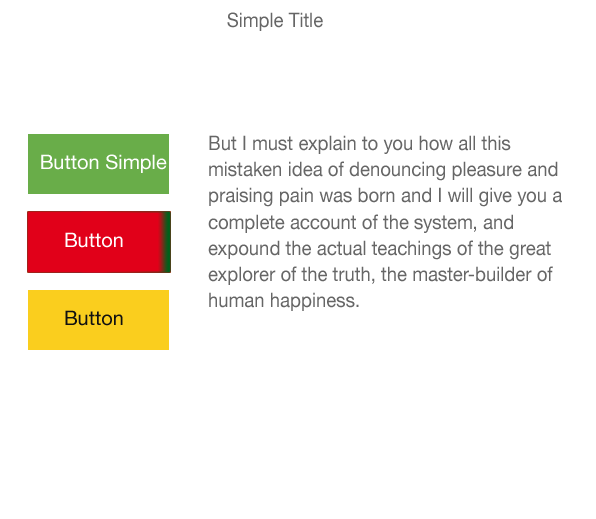
<style>
.page{position:relative;width:596px;height:519px;background:#ffffff}
.page>*{position:absolute;margin:0}
.t1{font:20px "HelveticaNeue";color:#666666;scale:0.93 1}
.t2{font:20px/26px "HelveticaNeue";color:#666666;scale:0.93 1}
.t3{font:20px "HelveticaNeue";color:#ffffff}
.t4{font:20px "HelveticaNeue";color:#111111}
</style>
<div class="page">
<p class="t1" style="left:227px;top:12px;width:96px;height:19px">Simple Title</p>
<p class="t2" style="left:208px;top:135px;width:354px;height:176px">But I must explain to you how all this mistaken idea of denouncing pleasure and praising pain was born and I will give you a complete account of the system, and expound the actual teachings of the great explorer of the truth, the master-builder of human happiness.</p>
<p class="t3" style="left:41px;top:154px;width:126px;height:19px">Button Simple</p>
<p class="t3" style="left:65px;top:232px;width:58px;height:16px">Button</p>
<p class="t4" style="left:65px;top:310px;width:58px;height:16px">Button</p>
</div>
